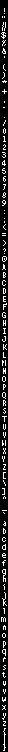
<style>
.page{position:relative;width:8px;height:752px;background:#000000}
.page>*{position:absolute;margin:0}
.t1{font:8px/8px "LetterGothicStd";color:#ffffff}
</style>
<div class="page">
<p class="t1" style="left:1px;top:8px;width:6px;height:743px;text-align:center">!<br>"<br>#<br>$<br>%<br>&amp;<br>'<br>(<br>)<br>*<br>+<br>,<br>-<br>.<br>/<br>0<br>1<br>2<br>3<br>4<br>5<br>6<br>7<br>8<br>9<br>:<br>;<br>&lt;<br>=<br>&gt;<br>?<br>@<br>A<br>B<br>C<br>D<br>E<br>F<br>G<br>H<br>I<br>J<br>K<br>L<br>M<br>N<br>O<br>P<br>Q<br>R<br>S<br>T<br>U<br>V<br>W<br>X<br>Y<br>Z<br>[<br>\<br>]<br>^<br>_<br>`<br>a<br>b<br>c<br>d<br>e<br>f<br>g<br>h<br>i<br>j<br>k<br>l<br>m<br>n<br>o<br>p<br>q<br>r<br>s<br>t<br>u<br>v<br>w<br>x<br>y<br>z<br>{<br>|<br>}</p>
</div>
